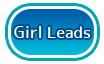
<style>
.page{position:relative;width:104px;height:64px;background:#ffffff}
.page>*{position:absolute;margin:0}
.t1{font:16px "JK-Gothic-M";color:#ffffff}
</style>
<div class="page">
<p class="t1" style="left:14px;top:25px;width:77px;height:14px">Girl Leads</p>
</div>
